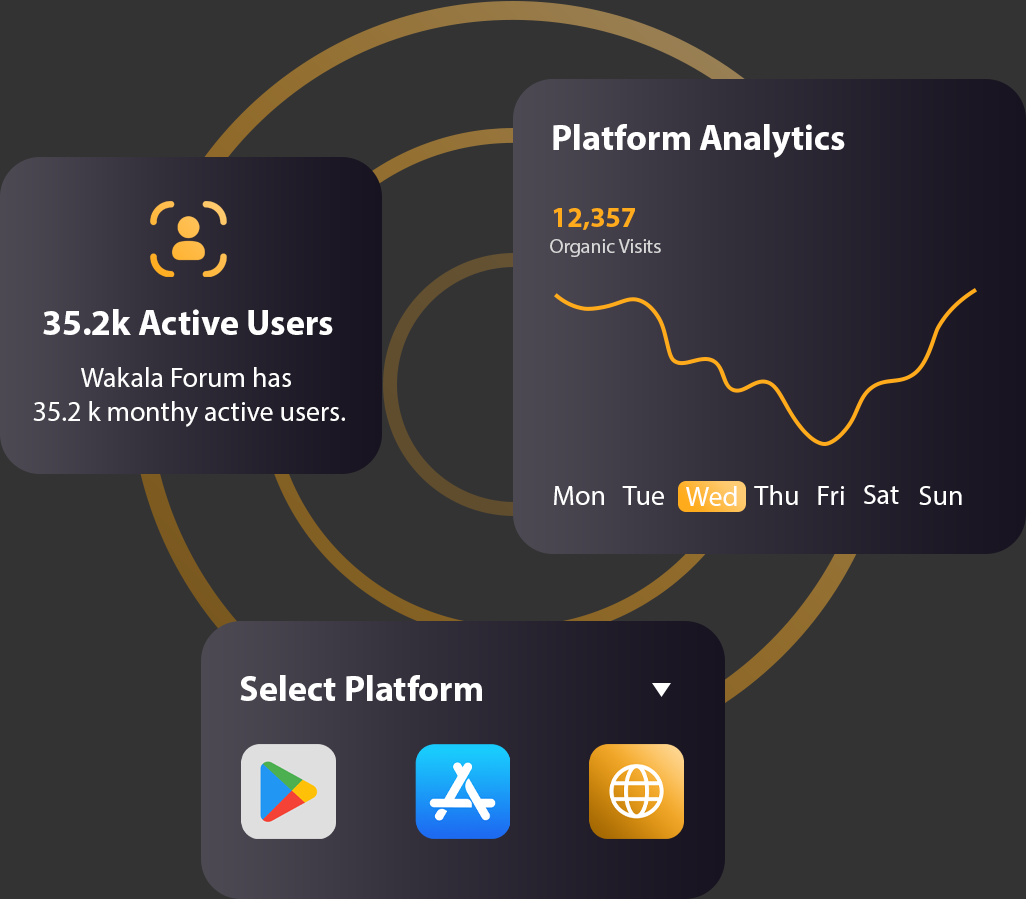
<style>
.page{position:relative;width:1026px;height:899px;background:#333333}
.page>*{position:absolute;margin:0}
.t1{font:36px "MyriadPro-Bold";color:#ffffff}
.t2{font:28px "MyriadPro-Bold";color:#ffab1b}
.t3{font:20px "MyriadPro-Regular";color:#d9d9d9}
.t4{font:28px "MyriadPro-Regular";color:#ffffff}
</style>
<div class="page">
<p class="t1" style="left:553px;top:124px;width:292px;height:34px">Platform Analytics</p>
<p class="t2" style="left:553px;top:208px;width:82px;height:22px">12,357</p>
<p class="t3" style="left:550px;top:239px;width:111px;height:18px">Organic Visits</p>
<p class="t1" style="left:43px;top:309px;width:290px;height:26px">35.2k Active Users</p>
<p class="t4" style="left:33px;top:367px;width:312px;height:60px;text-align:center">Wakala Forum has <br>35.2 k monthy active users.</p>
<p class="t4" style="left:554px;top:486px;width:50px;height:19px">Mon</p>
<p class="t4" style="left:622px;top:486px;width:42px;height:19px">Tue</p>
<p class="t4" style="left:686px;top:486px;width:51px;height:20px">Wed</p>
<p class="t4" style="left:754px;top:485px;width:44px;height:20px">Thu</p>
<p class="t4" style="left:818px;top:486px;width:26px;height:19px">Fri</p>
<p class="t4" style="left:864px;top:485px;width:35px;height:19px">Sat</p>
<p class="t4" style="left:919px;top:486px;width:43px;height:19px">Sun</p>
<p class="t1" style="left:240px;top:675px;width:242px;height:26px">Select Platform</p>
</div>
